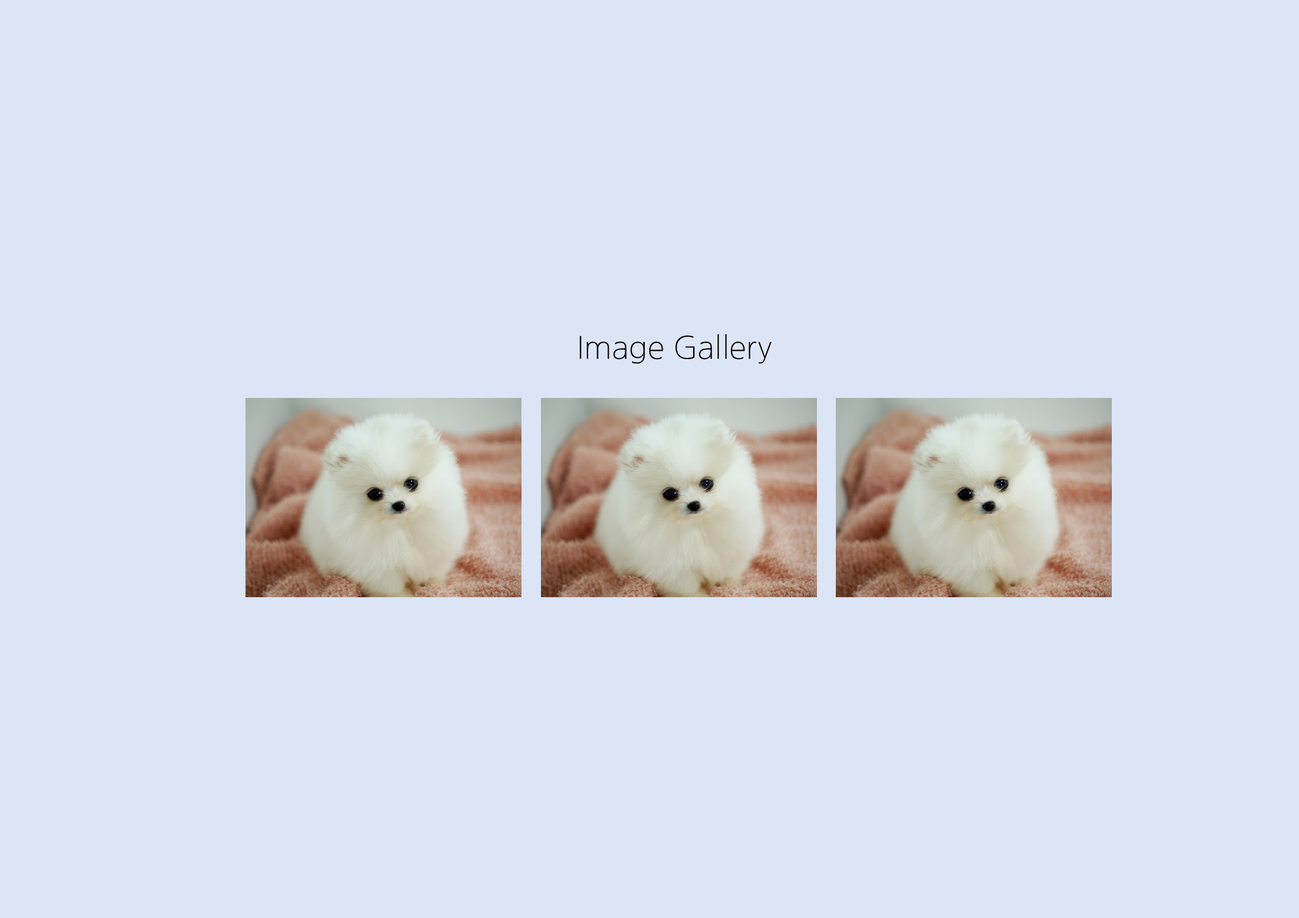
<style>
.page{position:relative;width:1299px;height:918px;background:#dbe5f6}
.page>*{position:absolute;margin:0}
.t1{font:30.8px "NanumGothicOTFLight";color:#110303}
</style>
<div class="page">
<p class="t1" style="left:580px;top:334px;width:191px;height:30px">Image Gallery</p>
<p class="t1" style="left:580px;top:334px;width:191px;height:30px">Image Gallery</p>
</div>
